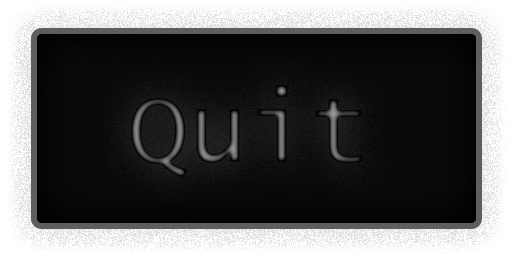
<style>
.page{position:relative;width:512px;height:256px}
.page>*{position:absolute;margin:0}
.t1{font:100px "LucidaConsole"}
</style>
<div class="page">
<p class="t1" style="left:131px;top:85px;width:232px;height:93px">Quit</p>
</div>
